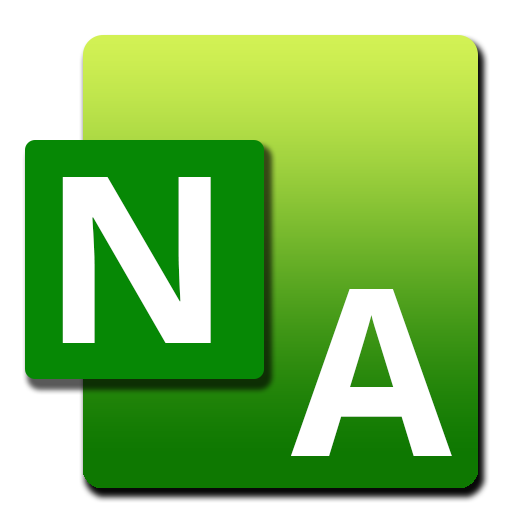
<style>
.page{position:relative;width:512px;height:512px;background:#ffffff}
.page>*{position:absolute;margin:0}
.t1{font:233px "NotoSans-Bold";color:#ffffff}
</style>
<div class="page">
<p class="t1" style="left:62px;top:177px;width:149px;height:166px">N</p>
<p class="t1" style="left:291px;top:289px;width:161px;height:167px">A</p>
</div>
